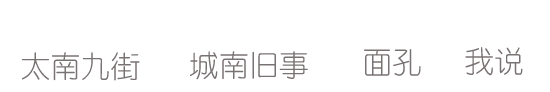
<style>
.page{position:relative;width:550px;height:92px;background:#ffffff}
.page>*{position:absolute;margin:0}
.t1{font:30px "YouYuan";color:#797273}
.t2{font:36px "YouYuan";color:#797273}
</style>
<div class="page">
<p class="t1" style="left:22px;top:52px;width:118px;height:29px"><span class="t2"> </span> 太南九街</p>
<p class="t1" style="left:190px;top:51px;width:118px;height:29px">城南旧事</p>
<p class="t1" style="left:364px;top:49px;width:57px;height:27px">面孔</p>
<p class="t1" style="left:465px;top:47px;width:58px;height:29px">我说</p>
</div>
